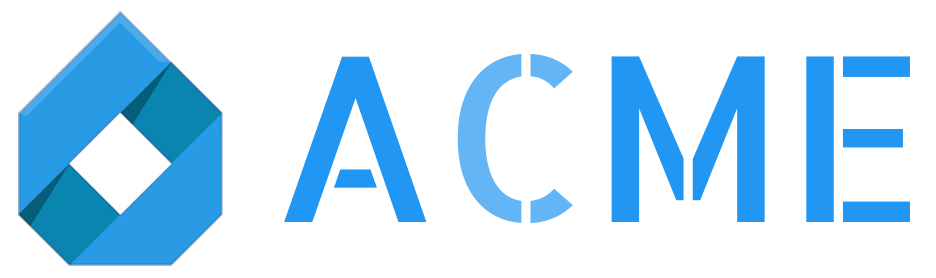
<style>
.page{position:relative;width:936px;height:278px;background:#ffffff}
.page>*{position:absolute;margin:0}
.t1{font:230px "AllertaStencil-Regular";color:#2196f3}
.t2{font:230px "AllertaStencil-Regular";color:#64b5f6}
</style>
<div class="page">
<p class="t1" style="left:284px;top:53px;width:626px;height:171px">A<span class="t2">C</span>ME</p>
</div>
